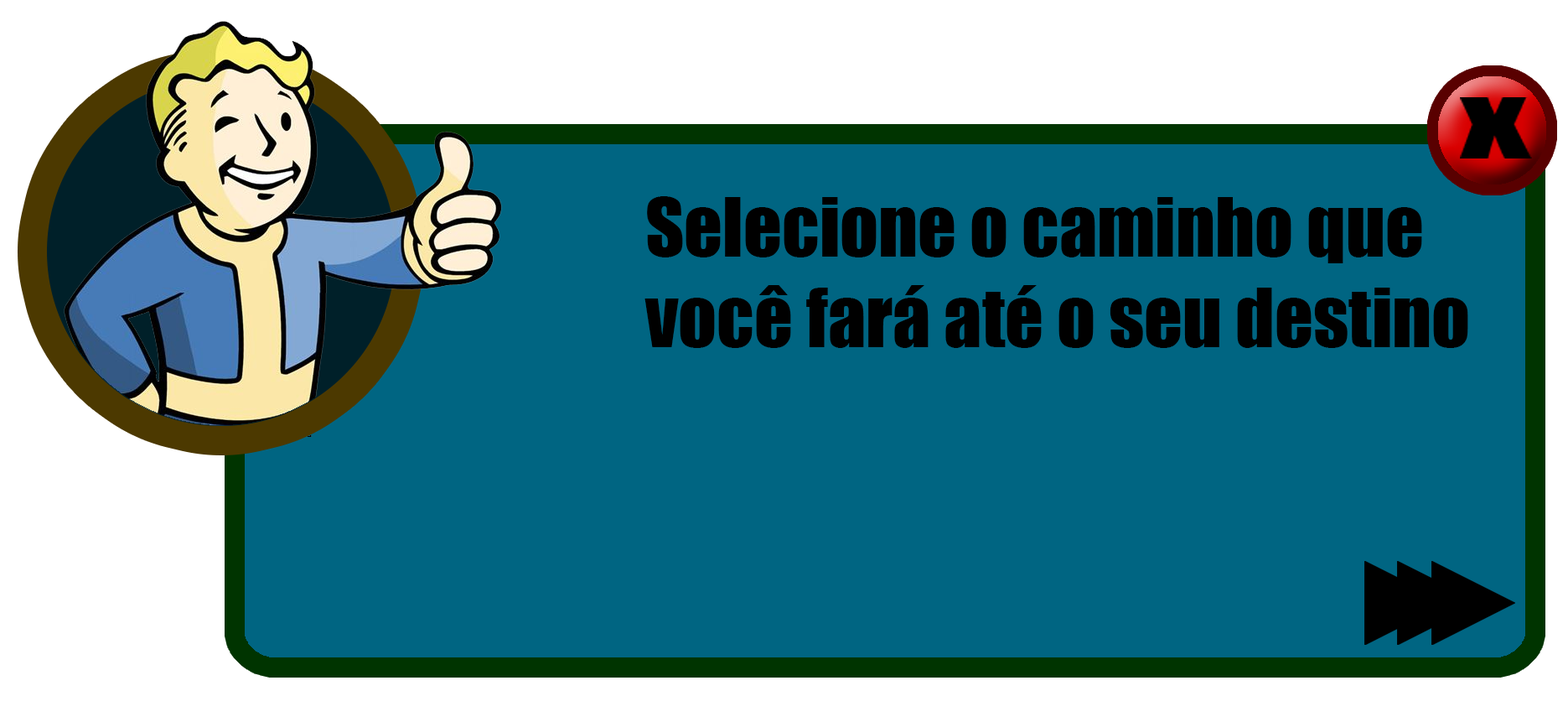
<style>
.page{position:relative;width:1568px;height:722px;background:#006582}
.page>*{position:absolute;margin:0}
.t1{font:75.4px "Impact";color:#000000}
</style>
<div class="page">
<p class="t1" style="left:644px;top:196px;width:824px;height:152px">Selecione o caminho que<br>você fará até o seu destino</p>
</div>
